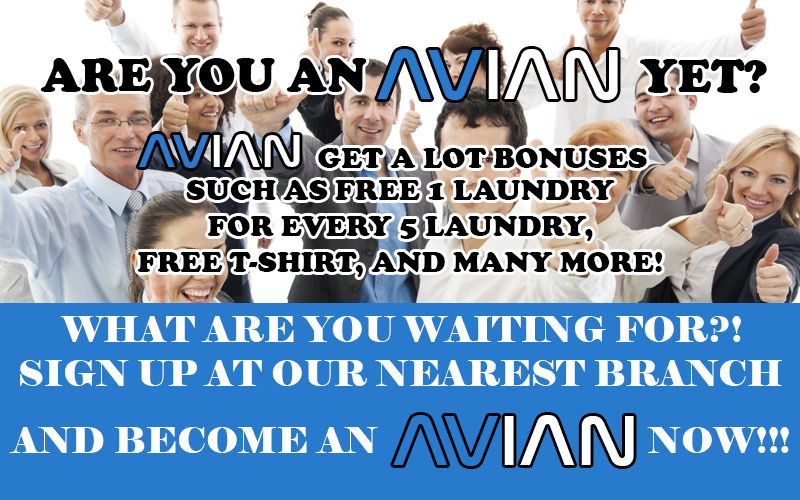
<style>
.page{position:relative;width:800px;height:500px;background:#287acc}
.page>*{position:absolute;margin:0}
.t1{font:72px "NasalizationRg-Regular";color:#ffffff}
.t2{font:72px "NasalizationRg-Regular";color:#287acc}
.t3{font:48px "NasalizationRg-Regular";color:#ffffff}
.t4{font:48px "NasalizationRg-Regular";color:#287acc}
.t5{font:30px "CooperBlack";color:#000000}
.t6{font:36px "Elephant-Regular";color:#ffffff}
</style>
<div class="page">
<p class="t1" style="left:377px;top:49px;width:241px;height:51px"><span class="t2">AV</span>IAN</p>
<p class="t3" style="left:138px;top:134px;width:162px;height:34px"><span class="t4">AV</span>IAN</p>
<p class="t5" style="left:318px;top:148px;width:329px;height:20px">GET A LOT BONUSES</p>
<p class="t5" style="left:137px;top:180px;width:526px;height:97px;text-align:center">SUCH AS FREE 1 LAUNDRY <br>FOR EVERY 5 LAUNDRY, <br>FREE T-SHIRT, AND MANY MORE!</p>
<p class="t6" style="left:60px;top:316px;width:681px;height:26px">WHAT ARE YOU WAITING FOR?!</p>
<p class="t6" style="left:20px;top:360px;width:762px;height:26px">SIGN UP AT OUR NEAREST BRANCH</p>
<p class="t1" style="left:393px;top:415px;width:241px;height:51px"><span class="t2">AV</span>IAN</p>
<p class="t6" style="left:9px;top:427px;width:369px;height:26px">AND BECOME AN</p>
<p class="t6" style="left:647px;top:427px;width:142px;height:26px">NOW!!!</p>
</div>
